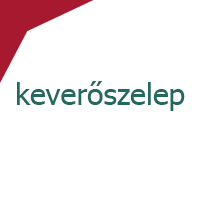
<style>
.page{position:relative;width:200px;height:200px;background:#ffffff}
.page>*{position:absolute;margin:0}
.t1{font:30px "Tahoma";color:#266860}
</style>
<div class="page">
<p class="t1" style="left:17px;top:81px;width:168px;height:30px">keverőszelep</p>
</div>
